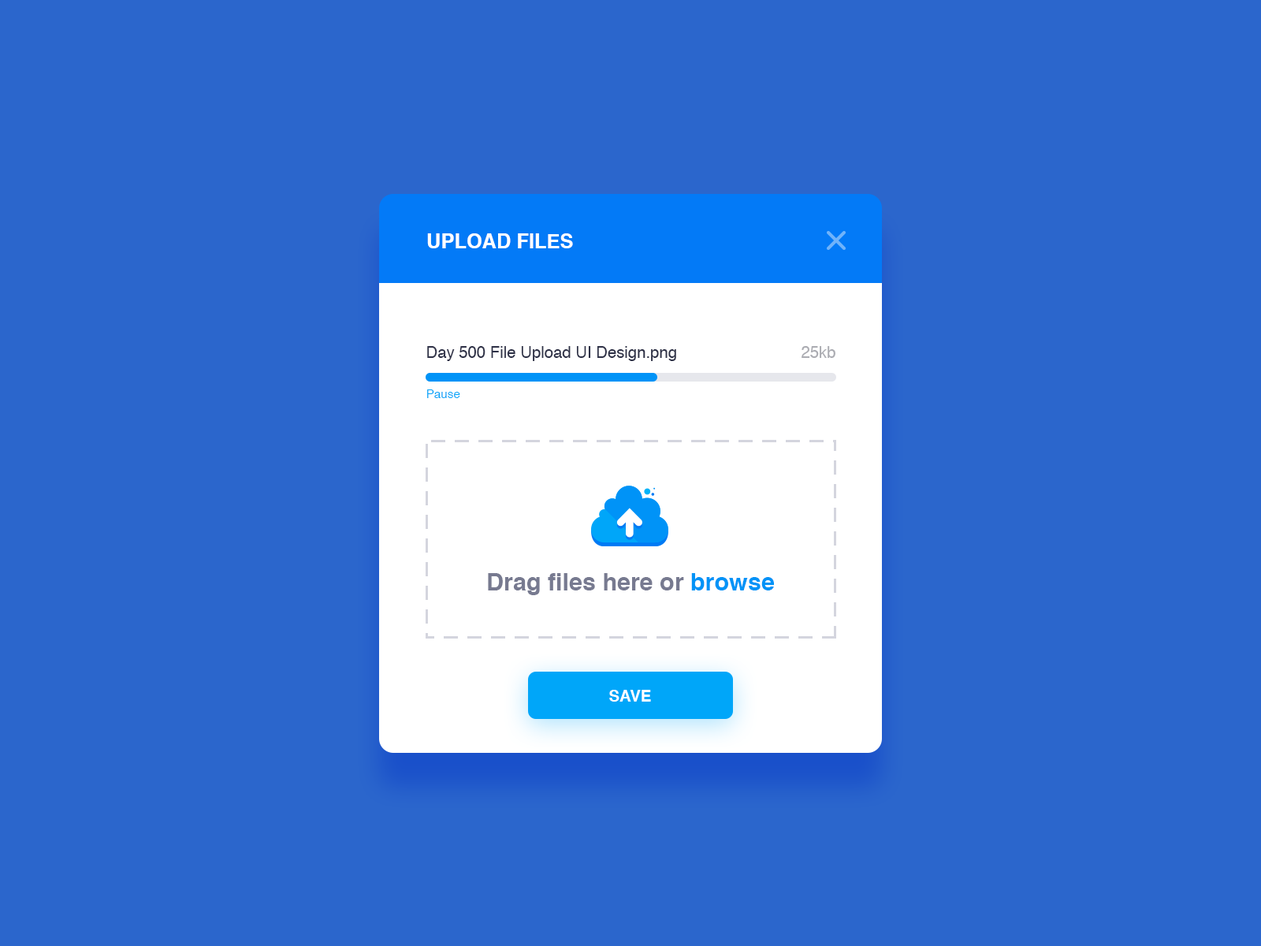
<style>
.page{position:relative;width:1261px;height:946px;background:#2b66cc}
.page>*{position:absolute;margin:0}
.t1{font:20px "Helvetica-Bold";color:#ffffff;text-transform:uppercase}
.t2{font:16px "Helvetica";color:#2e3147}
.t3{font:16px "Helvetica";color:#abacb2}
.t4{font:12px "Helvetica";color:#00a6f9}
.t5{font:24px "Helvetica-Bold";color:#777a90}
.t6{font:24px "Helvetica-Bold";color:#0093f7}
.t7{font:16px "Helvetica-Bold";color:#ffffff;text-transform:uppercase}
</style>
<div class="page">
<p class="t1" style="left:427px;top:233px;width:146px;height:15px">Upload files</p>
<p class="t2" style="left:427px;top:346px;width:249px;height:15px">Day 500 File Upload UI Design.png</p>
<p class="t3" style="left:801px;top:346px;width:34px;height:12px">25kb</p>
<p class="t4" style="left:427px;top:389px;width:33px;height:9px">Pause</p>
<p class="t5" style="left:488px;top:573px;width:286px;height:22px">Drag files here or <span class="t6">browse</span></p>
<p class="t7" style="left:609px;top:690px;width:42px;height:11px">Save</p>
</div>
